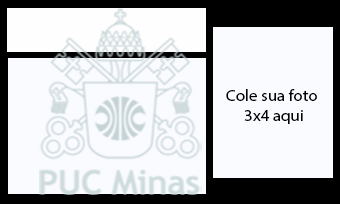
<style>
.page{position:relative;width:340px;height:204px;background:#f9fbff}
.page>*{position:absolute;margin:0}
.t1{font:16px "MyriadPro-Regular";color:#000000;scale:1.06 1}
</style>
<div class="page">
<p class="t1" style="left:226px;top:89px;width:91px;height:35px">Cole sua foto<br>     3x4 aqui</p>
</div>
